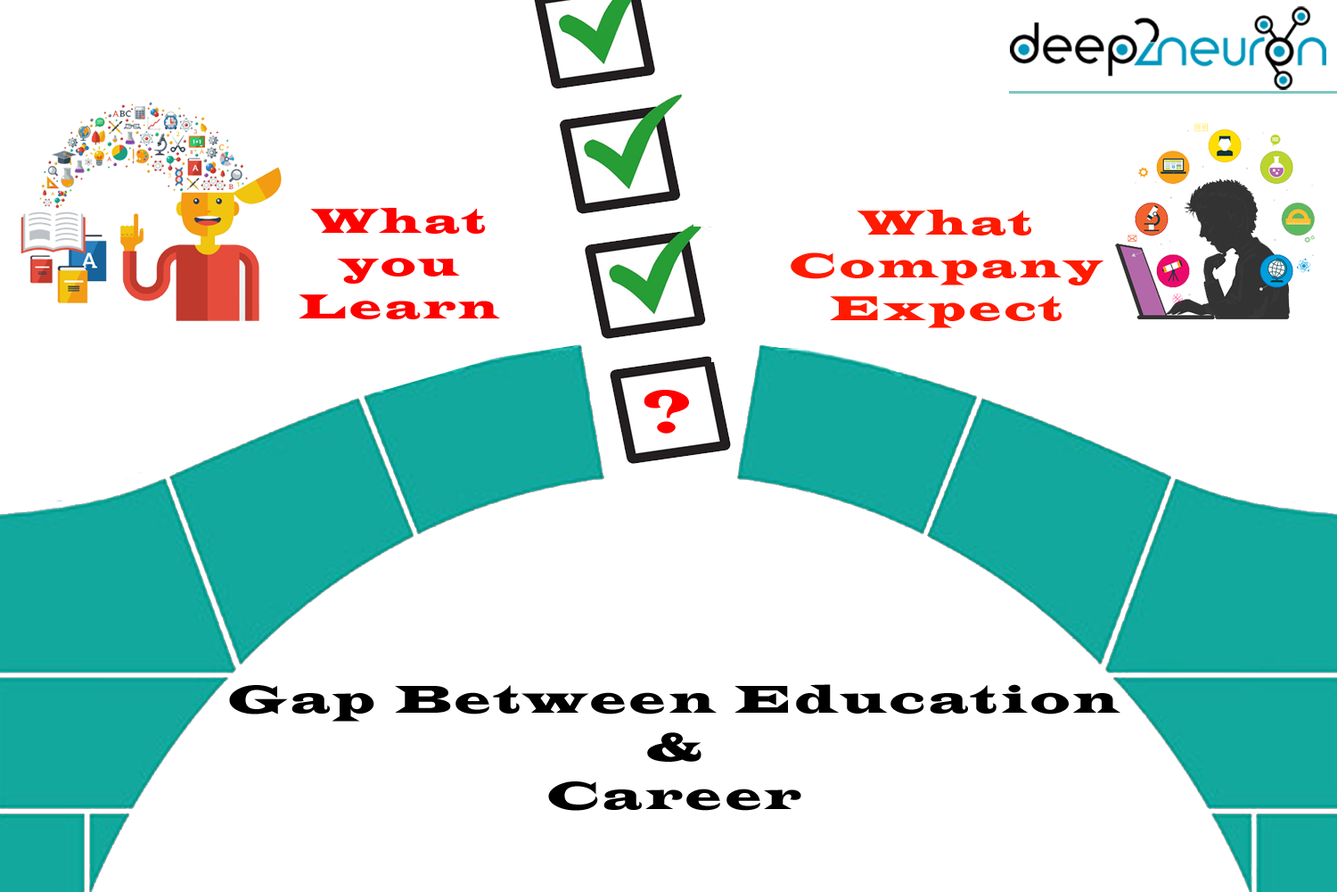
<style>
.page{position:relative;width:1337px;height:892px;background:#ffffff}
.page>*{position:absolute;margin:0}
.t1{font:35.7px "LatinWide";letter-spacing:0.1em;color:#ff0000}
.t2{font:35.7px "LatinWide";letter-spacing:0.1em;color:#ff1a00}
.t3{font:62.4px "LatinWide";letter-spacing:0.1em;color:#ff0000}
.t4{font:40.1px "LatinWide";letter-spacing:0.1em;color:#000000}
</style>
<div class="page">
<p class="t1" style="left:299px;top:208px;width:201px;height:111px;text-align:center">What <br>you <br>Learn</p>
<p class="t2" style="left:791px;top:210px;width:314px;height:118px;text-align:center">What <br>Company <br>Expect</p>
<p class="t3" style="left:644px;top:390px;width:45px;height:43px">?</p>
<p class="t4" style="left:229px;top:684px;width:892px;height:126px;text-align:center">Gap Between Education &amp;<br>Career</p>
</div>
